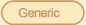
<style>
.page{position:relative;width:86px;height:25px;background:#fcebc0}
.page>*{position:absolute;margin:0}
.t1{font:12px "ArialMT";letter-spacing:-0.04em;color:#c99b67;font-weight:bold}
</style>
<div class="page">
<p class="t1" style="left:18px;top:8px;width:42px;height:10px">Generic</p>
</div>
